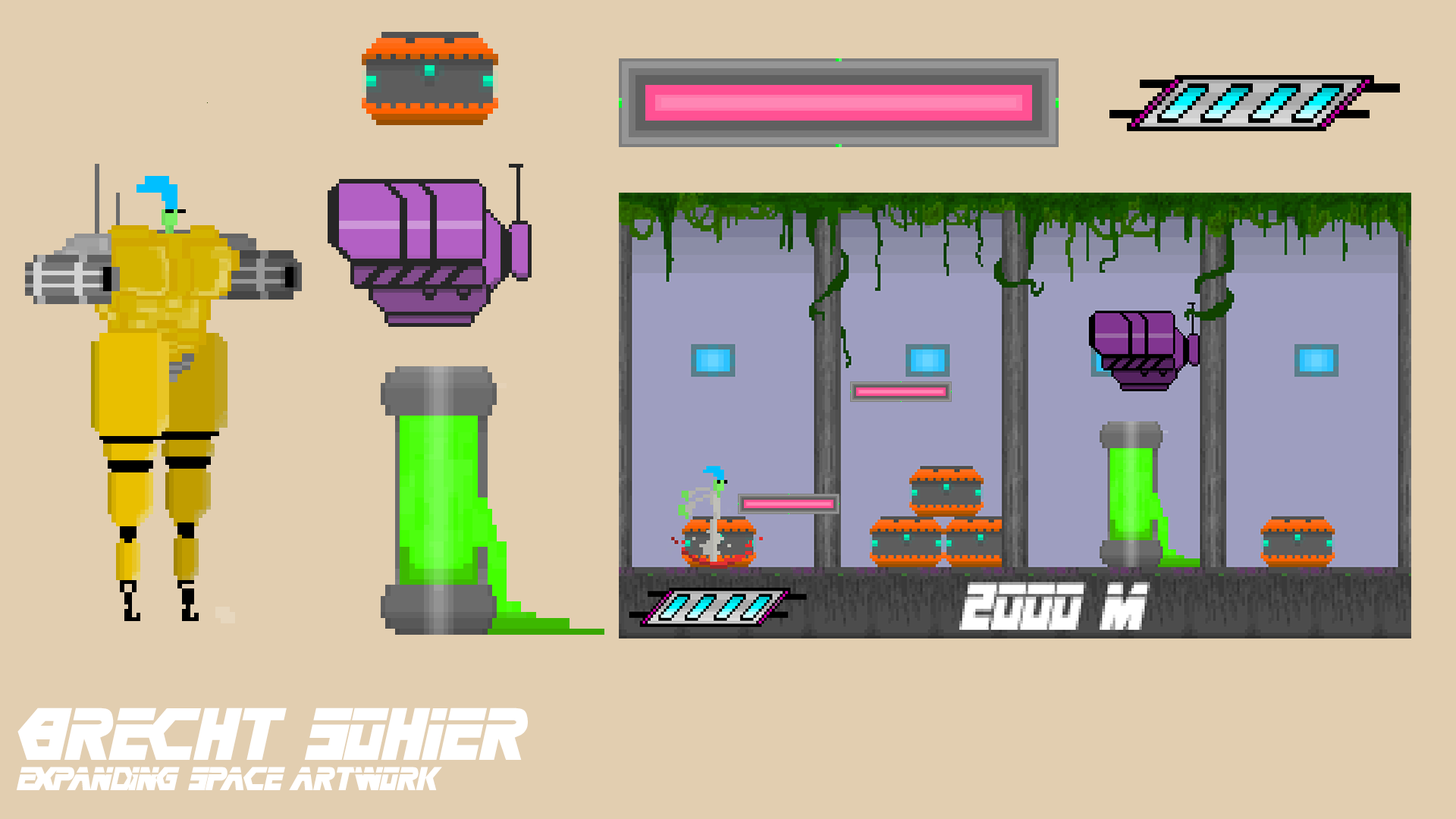
<style>
.page{position:relative;width:1456px;height:819px;background:#e2ceb0}
.page>*{position:absolute;margin:0}
.t1{font:25.3px "MetalGear";color:#ffffff}
.t2{font:56.9px "MetalGear";color:#ffffff}
</style>
<div class="page">
<p class="t1" style="left:17px;top:708px;width:511px;height:82px"><span class="t2">brecht sohier<br></span>expanding space artwork</p>
</div>
